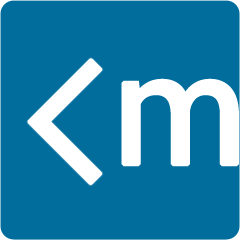
<style>
.page{position:relative;width:240px;height:240px;background:#006d9c}
.page>*{position:absolute;margin:0}
.t1{font:153.9px "Roboto-Regular";letter-spacing:-0.1em;color:#ffffff;font-weight:bold}
</style>
<div class="page">
<p class="t1" style="left:121px;top:78px;width:118px;height:89px">m</p>
</div>
